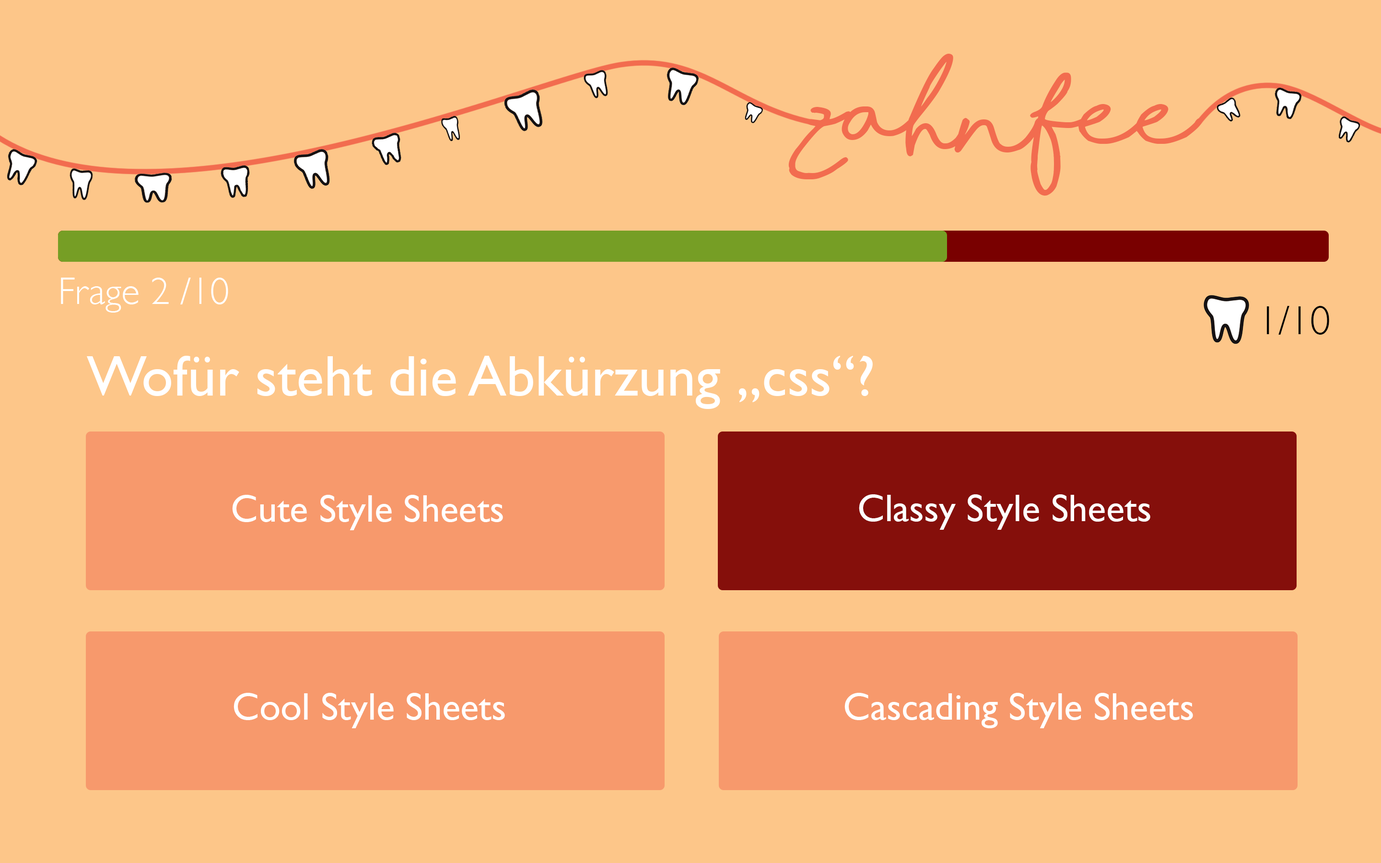
<style>
.page{position:relative;width:1381px;height:863px;background:#fdc689}
.page>*{position:absolute;margin:0}
.t1{font:95.9px "ShorelinesScriptBold";color:#f26c4f}
.t2{font:38.4px "GillSans-Light";color:#ffffff}
.t3{font:40.8px "GillSans-Light";color:#000000}
.t4{font:57.6px "GillSans";color:#ffffff}
.t5{font:38.4px "GillSans";color:#ffffff}
</style>
<div class="page">
<p class="t1" style="left:788px;top:54px;width:415px;height:142px">zahnfee</p>
<p class="t2" style="left:61px;top:278px;width:167px;height:35px">Frage 2 /10</p>
<p class="t3" style="left:1267px;top:306px;width:62px;height:29px">1/10</p>
<p class="t4" style="left:87px;top:356px;width:786px;height:53px">Wofür steht die Abkürzung „css“?</p>
<p class="t5" style="left:232px;top:495px;width:271px;height:35px">Cute Style Sheets</p>
<p class="t5" style="left:859px;top:494px;width:292px;height:36px">Classy Style Sheets</p>
<p class="t5" style="left:234px;top:693px;width:271px;height:36px">Cool Style Sheets</p>
<p class="t5" style="left:845px;top:693px;width:348px;height:36px">Cascading Style Sheets</p>
</div>
